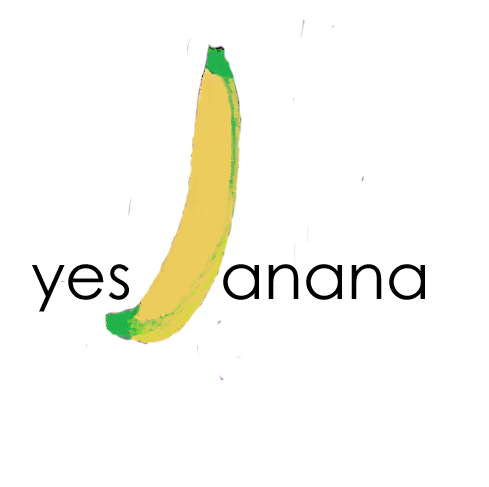
<style>
.page{position:relative;width:489px;height:487px;background:#ffffff}
.page>*{position:absolute;margin:0}
.t1{font:64px "CenturyGothic";color:#000000}
</style>
<div class="page">
<p class="t1" style="left:32px;top:264px;width:393px;height:48px">yes     anana</p>
</div>
